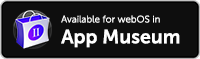
<style>
.page{position:relative;width:200px;height:59px;background:#0e0e0e}
.page>*{position:absolute;margin:0}
.t1{font:9.7px "MuseoSans-Light";color:#ffffff}
.t2{font:19.3px "MuseoSans-Bold";color:#ffffff}
</style>
<div class="page">
<p class="t1" style="left:61px;top:15px;width:99px;height:8px">Available for webOS in</p>
<p class="t2" style="left:61px;top:29px;width:119px;height:19px">App Museum</p>
</div>
